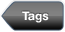
<style>
.page{position:relative;width:65px;height:32px}
.page>*{position:absolute;margin:0}
.t1{font:12px "HelveticaNeue-Bold";color:#ffffff}
</style>
<div class="page">
<p class="t1" style="left:22px;top:11px;width:27px;height:12px">Tags</p>
</div>
